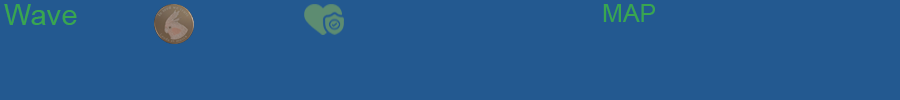
<style>
.page{position:relative;width:900px;height:100px;background:#235990}
.page>*{position:absolute;margin:0}
.t1{font:29.2px "ArialMT";color:#39a64f}
.t2{font:25px "ArialMT";color:#39a64f}
</style>
<div class="page">
<p class="t1" style="left:4px;top:4px;width:73px;height:21px">Wave</p>
<p class="t2" style="left:603px;top:4px;width:52px;height:18px">MAP</p>
</div>
